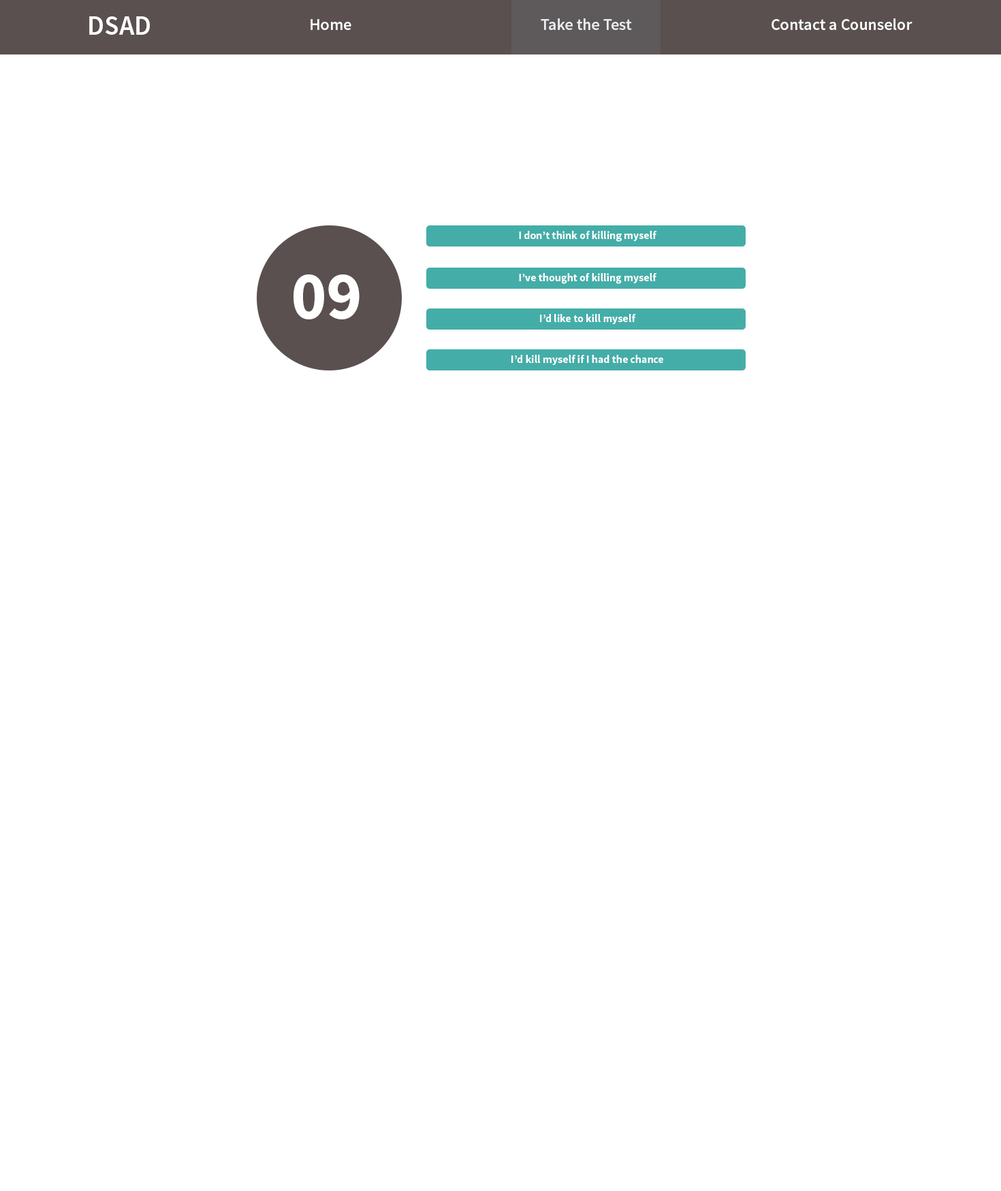
<style>
.page{position:relative;width:1001px;height:1191px;background:#ffffff}
.page>*{position:absolute;margin:0}
.t1{font:27.2px "SourceSansPro-Semibold";color:#ffffff}
.t2{font:16.3px "SourceSansPro-Semibold";color:#ffffff}
.t3{font:10.9px "SourceSansPro-Bold";color:#ffffff}
.t4{font:68.1px "SourceSansPro-Bold";color:#ffffff}
</style>
<div class="page">
<p class="t1" style="left:89px;top:16px;width:61px;height:19px">DSAD</p>
<p class="t2" style="left:311px;top:19px;width:40px;height:11px">Home</p>
<p class="t2" style="left:541px;top:18px;width:91px;height:12px">Take the Test</p>
<p class="t2" style="left:772px;top:18px;width:141px;height:12px">Contact a Counselor</p>
<p class="t3" style="left:519px;top:231px;width:138px;height:11px">I don’t think of killing myself</p>
<p class="t4" style="left:294px;top:274px;width:66px;height:45px">09</p>
<p class="t3" style="left:519px;top:273px;width:138px;height:11px">I’ve thought of killing myself</p>
<p class="t3" style="left:540px;top:314px;width:96px;height:10px">I’d like to kill myself</p>
<p class="t3" style="left:511px;top:355px;width:152px;height:10px">I’d kill myself if I had the chance</p>
</div>
